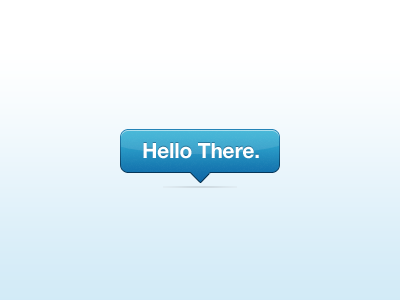
<style>
.page{position:relative;width:400px;height:300px}
.page>*{position:absolute;margin:0}
.t1{font:21px "HelveticaNeue-Bold";letter-spacing:-0.01em;color:#ffffff}
</style>
<div class="page">
<p class="t1" style="left:143px;top:143px;width:116px;height:16px">Hello There.</p>
</div>
